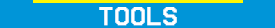
<style>
.page{position:relative;width:275px;height:28px;background:#0095d8}
.page>*{position:absolute;margin:0}
.t1{font:26px "VCROSDMono";color:#ffffff;font-weight:bold}
</style>
<div class="page">
<p class="t1" style="left:99px;top:7px;width:78px;height:19px">TOOLS</p>
</div>
